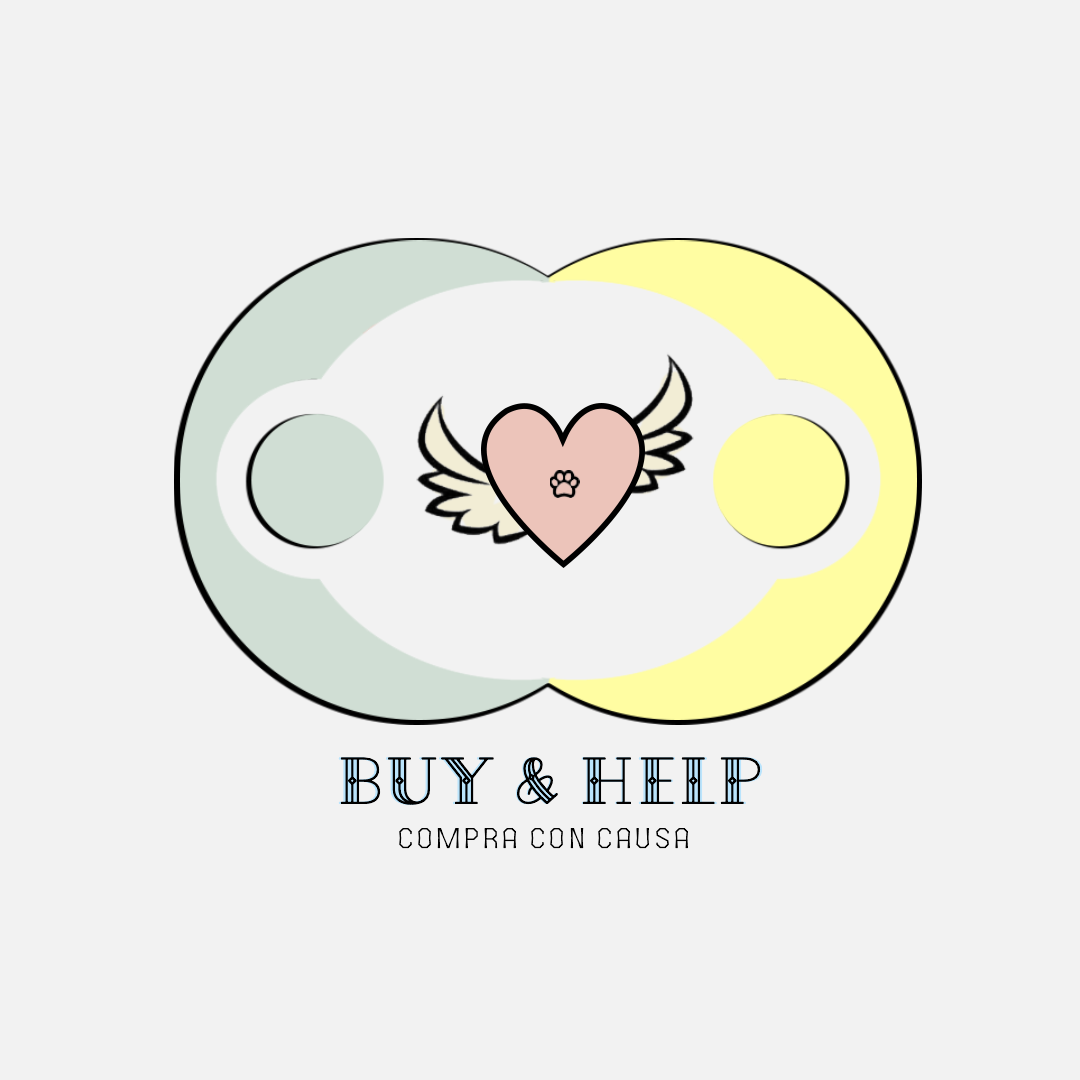
<style>
.page{position:relative;width:1080px;height:1080px;background:#f2f2f2}
.page>*{position:absolute;margin:0}
.t1{font:63.4px "CodianOctoberEight"}
.t2{font:63.4px "CodianOctoberNine";color:#000000}
.t3{font:34.3px "TheOctoberTwoLight";color:#000000}
</style>
<div class="page">
<p class="t1" style="left:338px;top:757px;width:425px;height:48px">BUY &amp; HELP</p>
<p class="t2" style="left:340px;top:757px;width:421px;height:48px">BUY &amp; HELP</p>
<p class="t3" style="left:399px;top:828px;width:289px;height:21px">COMPRA CON CAUSA</p>
</div>
